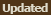
<style>
.page{position:relative;width:51px;height:15px;background:#503517}
.page>*{position:absolute;margin:0}
.t1{font:11px "Verdana-Bold";letter-spacing:-0.08em;color:#dedbcb}
</style>
<div class="page">
<p class="t1" style="left:2px;top:3px;width:46px;height:11px">Updated</p>
</div>
